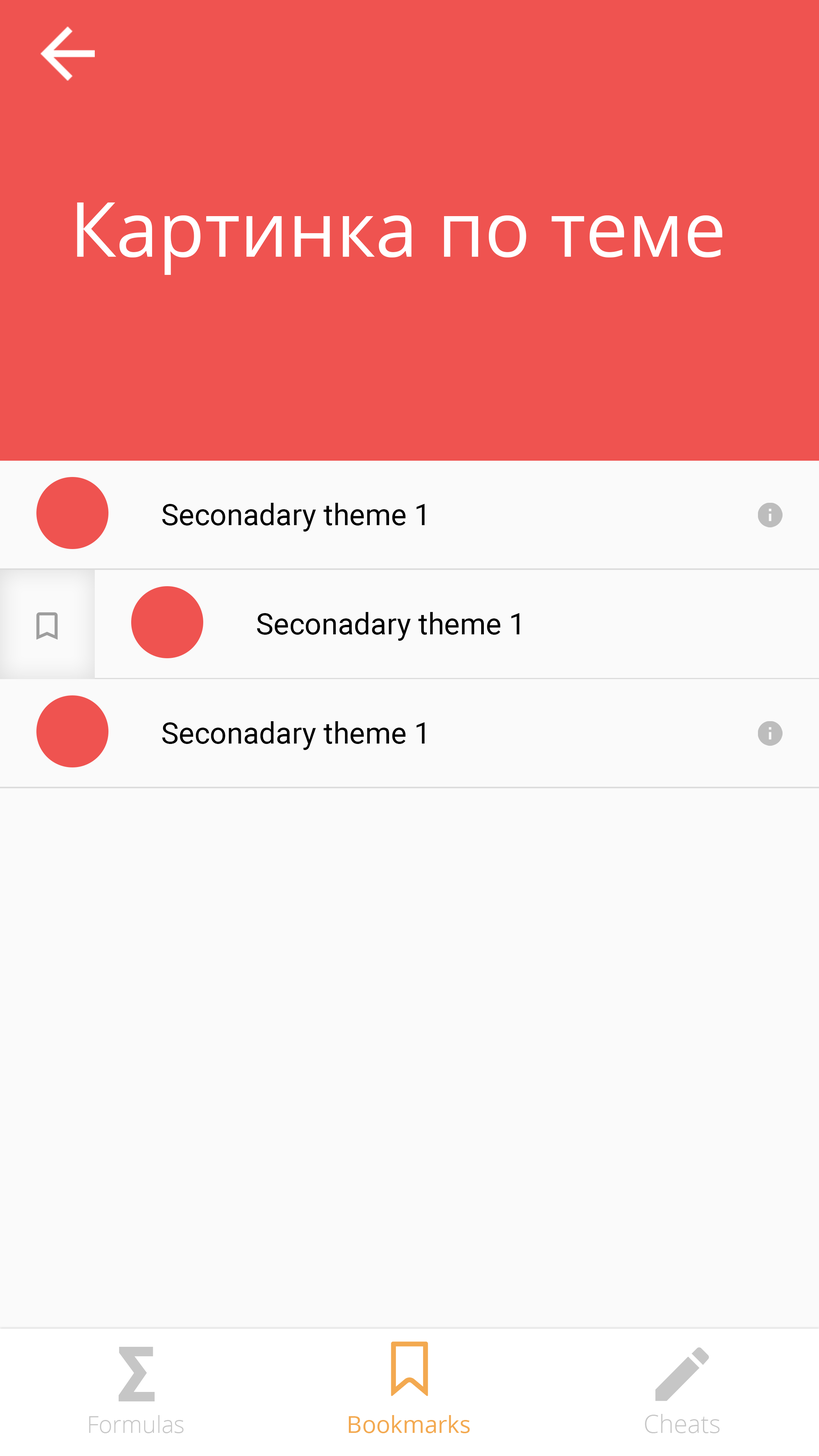
<style>
.page{position:relative;width:819px;height:1456px;background:#fafafa}
.page>*{position:absolute;margin:0}
.t1{font:75.8px "OpenSans";color:#ffffff}
.t2{font:29.6px "Roboto-Regular";color:#000000}
.t3{font:59.2px "OpenSans-ExtraBold";color:#c6c6c6}
.t4{font:23.5px "OpenSans-Light";color:#c6c6c6}
.t5{font:23.5px "OpenSans-Regular";color:#f3a950}
.t6{font:25px "OpenSans-Light";color:#c6c6c6}
</style>
<div class="page">
<p class="t1" style="left:77px;top:202px;width:645px;height:73px">Картинка по теме</p>
<p class="t2" style="left:162px;top:503px;width:263px;height:29px">Seconadary theme 1</p>
<p class="t2" style="left:257px;top:612px;width:262px;height:29px">Seconadary theme 1</p>
<p class="t2" style="left:162px;top:721px;width:263px;height:29px">Seconadary theme 1</p>
<p class="t3" style="left:118px;top:1347px;width:37px;height:54px">∑</p>
<p class="t4" style="left:89px;top:1415px;width:95px;height:18px">Formulas</p>
<p class="t5" style="left:349px;top:1415px;width:121px;height:18px">Bookmarks</p>
<p class="t6" style="left:645px;top:1414px;width:75px;height:19px">Cheats</p>
</div>
